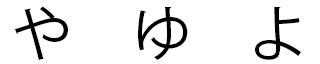
<style>
.page{position:relative;width:320px;height:64px;background:#ffffff}
.page>*{position:absolute;margin:0}
.t1{font:60px "KozGoPr6N-Regular";color:#000000}
</style>
<div class="page">
<p class="t1" style="left:15px;top:6px;width:286px;height:54px">や　ゆ　よ</p>
</div>
